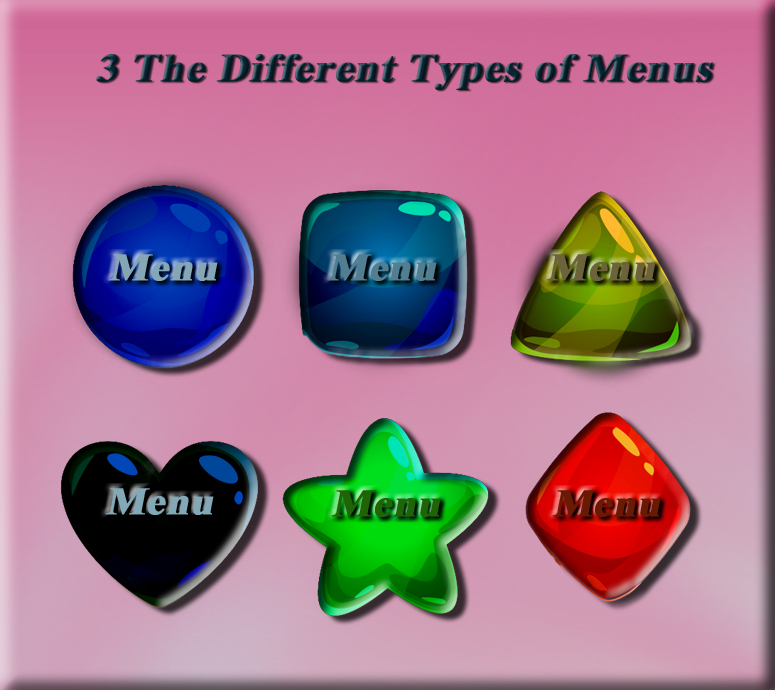
<style>
.page{position:relative;width:775px;height:690px}
.page>*{position:absolute;margin:0}
.t1{font:39.7px "TimesNewRomanPS-BoldMT";color:#052634;font-weight:bold;font-style:italic;scale:1.08 1}
.t2{font:38.8px "TimesNewRomanPS-BoldMT";color:#85a6b5;font-weight:bold;font-style:italic;scale:1.08 1}
.t3{font:38.8px "TimesNewRomanPS-BoldMT";color:#517e91;font-weight:bold;font-style:italic;scale:1.08 1}
.t4{font:38.8px "TimesNewRomanPS-BoldMT";color:#83a8b8;font-weight:bold;font-style:italic;scale:1.08 1}
.t5{font:38.8px "TimesNewRomanPS-BoldMT";color:#206408;font-weight:bold;font-style:italic;scale:1.08 1}
.t6{font:38.8px "TimesNewRomanPS-BoldMT";color:#6a1a04;font-weight:bold;font-style:italic;scale:1.08 1}
</style>
<div class="page">
<p class="t1" style="left:96px;top:54px;width:617px;height:36px">3 The Different Types of Menus</p>
<p class="t2" style="left:108px;top:254px;width:110px;height:27px">Menu</p>
<p class="t3" style="left:327px;top:254px;width:110px;height:27px">Menu</p>
<p class="t4" style="left:105px;top:488px;width:109px;height:27px">Menu</p>
<p class="t5" style="left:331px;top:490px;width:110px;height:27px">Menu</p>
<p class="t6" style="left:552px;top:490px;width:109px;height:27px">Menu</p>
</div>
